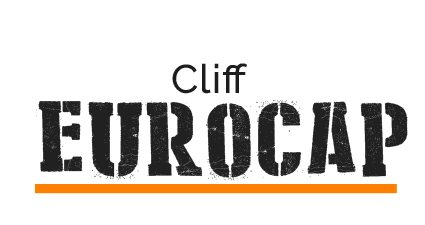
<style>
.page{position:relative;width:425px;height:225px;background:#ffffff}
.page>*{position:absolute;margin:0}
.t1{font:100px "StencilCargoArmy";letter-spacing:0.02em;color:#303030}
</style>
<div class="page">
<p class="t1" style="left:36px;top:100px;width:372px;height:81px">eUROCAP</p>
</div>
